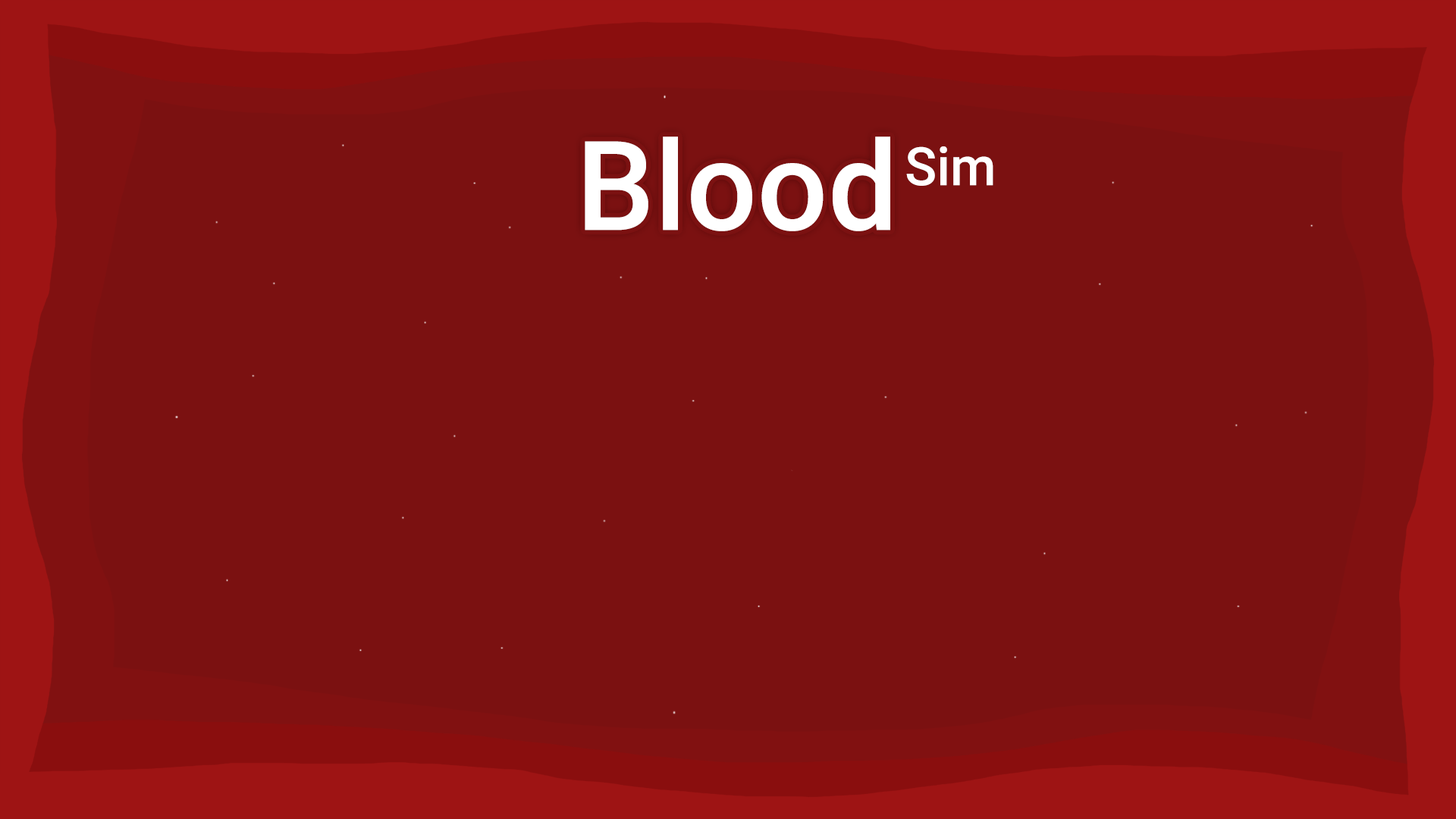
<style>
.page{position:relative;width:1456px;height:819px;background:#7b1111}
.page>*{position:absolute;margin:0}
.t1{font:124.3px "Roboto-Medium";color:#ffffff}
.t2{font:53.1px "Roboto-Medium";color:#ffffff}
</style>
<div class="page">
<p class="t1" style="left:585px;top:136px;width:305px;height:95px">Blood</p>
<p class="t2" style="left:906px;top:146px;width:87px;height:40px">Sim</p>
</div>
